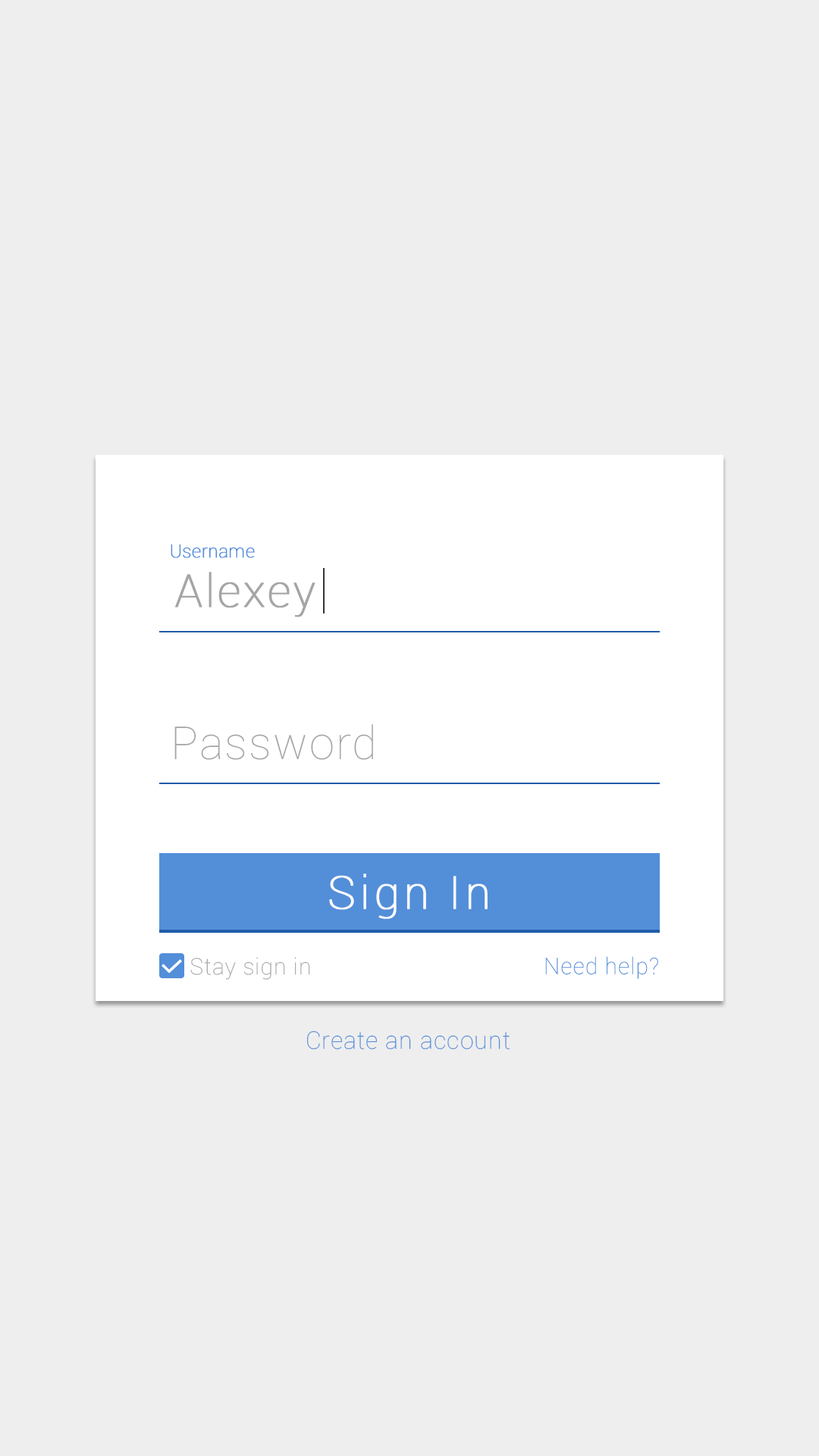
<style>
.page{position:relative;width:819px;height:1456px;background:#eeeeee}
.page>*{position:absolute;margin:0}
.t1{font:18.2px "Roboto-Thin";color:#538ed9;font-weight:bold}
.t2{font:45.5px "Roboto-Thin";letter-spacing:0.035em;color:#a4a5a5;font-weight:bold}
.t3{font:45.5px "Roboto-Thin";letter-spacing:0.035em;color:#a4a5a5}
.t4{font:45.5px "Roboto-Thin";letter-spacing:0.075em;color:#fcfdfe;font-weight:bold}
.t5{font:22.7px "Roboto-Thin";letter-spacing:0.035em;color:#a4a5a5}
.t6{font:22.7px "Roboto-Thin";letter-spacing:0.035em;color:#538ed9}
.t7{font:24.3px "Roboto-Thin";letter-spacing:0.035em;color:#538ed9}
</style>
<div class="page">
<p class="t1" style="left:171px;top:544px;width:84px;height:14px">Username</p>
<p class="t2" style="left:175px;top:572px;width:140px;height:45px">Alexey</p>
<p class="t3" style="left:174px;top:724px;width:199px;height:36px">Password</p>
<p class="t3" style="left:174px;top:724px;width:199px;height:36px">Password</p>
<p class="t4" style="left:329px;top:874px;width:159px;height:45px">Sign In</p>
<p class="t4" style="left:329px;top:874px;width:159px;height:45px">Sign In</p>
<p class="t5" style="left:190px;top:957px;width:120px;height:23px">Stay sign in</p>
<p class="t5" style="left:190px;top:957px;width:120px;height:23px">Stay sign in</p>
<p class="t6" style="left:545px;top:956px;width:113px;height:23px">Need help?</p>
<p class="t6" style="left:545px;top:956px;width:113px;height:23px">Need help?</p>
<p class="t7" style="left:307px;top:1031px;width:203px;height:19px">Create an account</p>
</div>
